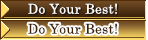
<style>
.page{position:relative;width:148px;height:40px}
.page>*{position:absolute;margin:0}
.t1{font:13.3px "CenturySchoolbook";letter-spacing:0.025em;color:#ffffff}
.t2{font:13.3px "CenturySchoolbook";letter-spacing:0.025em;color:#3b2108}
</style>
<div class="page">
<p class="t1" style="left:28px;top:3px;width:89px;height:11px">Do Your Best!</p>
<p class="t2" style="left:28px;top:23px;width:89px;height:11px">Do Your Best!</p>
</div>
